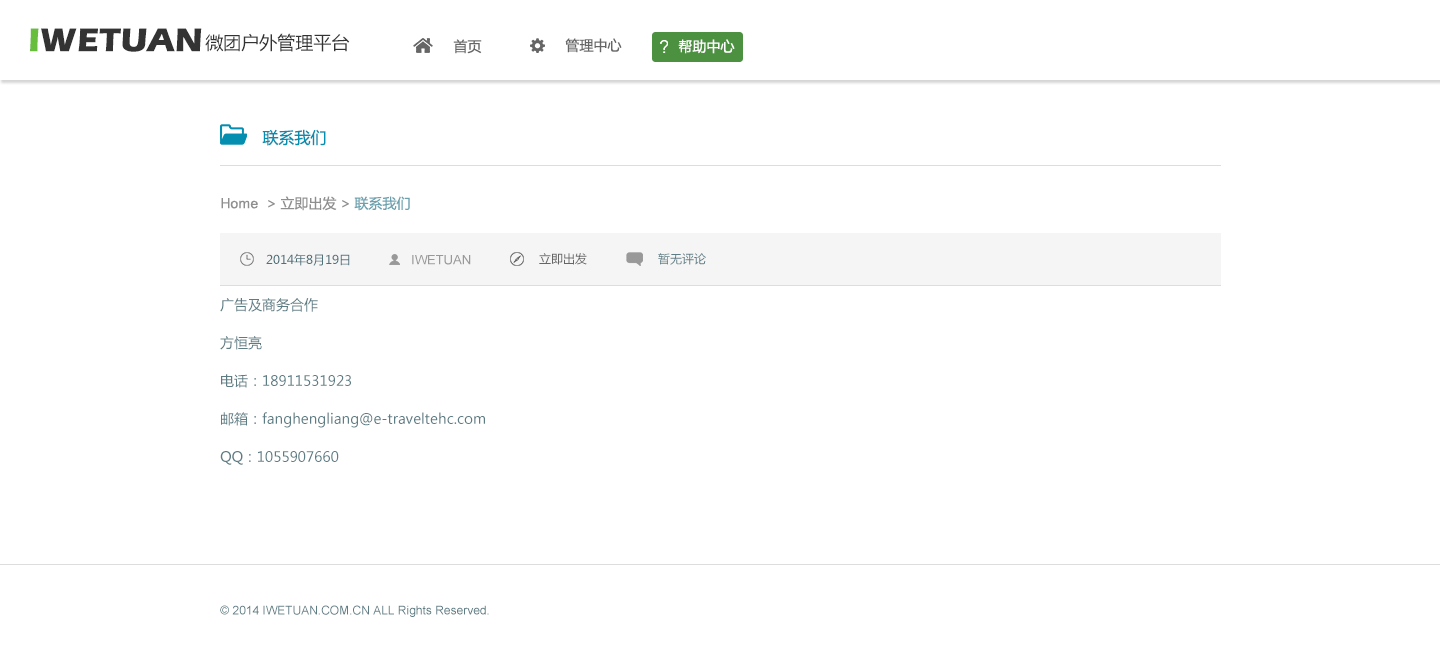
<style>
.page{position:relative;width:1440px;height:660px;background:#ffffff}
.page>*{position:absolute;margin:0}
.t1{font:34px "ErasITC-Bold";color:#333333}
.t2{font:34px "ErasITC-Bold";color:#67bd3c}
.t3{font:18px "MicrosoftYaHei";color:#333333}
.t4{font:14px "MicrosoftYaHei";color:#666666}
.t5{font:14px "MicrosoftYaHei";color:#ffffff}
.t6{font:16px "MicrosoftYaHei";color:#048eb0}
.t7{font:14px "MicrosoftYaHei";color:#8f8f8f}
.t8{font:14px "ArialMT";color:#8f8f8f}
.t9{font:14px "MicrosoftYaHei";color:#6ca2af}
.t10{font:12px "MicrosoftYaHei";color:#4e717a}
.t11{font:13px "ArialMT";color:#999999}
.t12{font:12px "MicrosoftYaHei";color:#666666}
.t13{font:12px "MicrosoftYaHei";color:#5d7c84}
.t14{font:14px/38px "MicrosoftYaHei";color:#5d7c84}
.t15{font:14px/24px "MicrosoftYaHei";color:#5d7c84}
.t16{font:12px "ArialMT";color:#5d7c84}
</style>
<div class="page">
<p class="t1" style="left:30px;top:28px;width:172px;height:24px"><span class="t2">I</span>WETUAN</p>
<p class="t3" style="left:205px;top:33px;width:145px;height:19px">微团户外管理平台</p>
<p class="t4" style="left:453px;top:39px;width:29px;height:15px">首页</p>
<p class="t4" style="left:565px;top:38px;width:57px;height:15px">管理中心</p>
<p class="t5" style="left:678px;top:39px;width:57px;height:15px">帮助中心</p>
<p class="t6" style="left:262px;top:129px;width:64px;height:17px">联系我们</p>
<p class="t7" style="left:221px;top:196px;width:189px;height:15px"><span class="t8">Home  </span>&gt; 立即出发 &gt; <span class="t9">联系我们</span></p>
<p class="t10" style="left:266px;top:253px;width:84px;height:13px">2014年8月19日</p>
<p class="t11" style="left:412px;top:255px;width:59px;height:10px">IWETUAN</p>
<p class="t12" style="left:539px;top:253px;width:48px;height:12px">立即出发</p>
<p class="t13" style="left:658px;top:253px;width:48px;height:12px">暂无评论</p>
<p class="t14" style="left:220px;top:298px;width:265px;height:167px;text-align:justify"><span class="t15">广告及商务合作<br></span>方恒亮<br>电话：18911531923<br>邮箱：fanghengliang@e-traveltehc.com<br>QQ：1055907660</p>
<p class="t16" style="left:220px;top:605px;width:269px;height:12px">© 2014 IWETUAN.COM.CN ALL Rights Reserved.</p>
</div>
